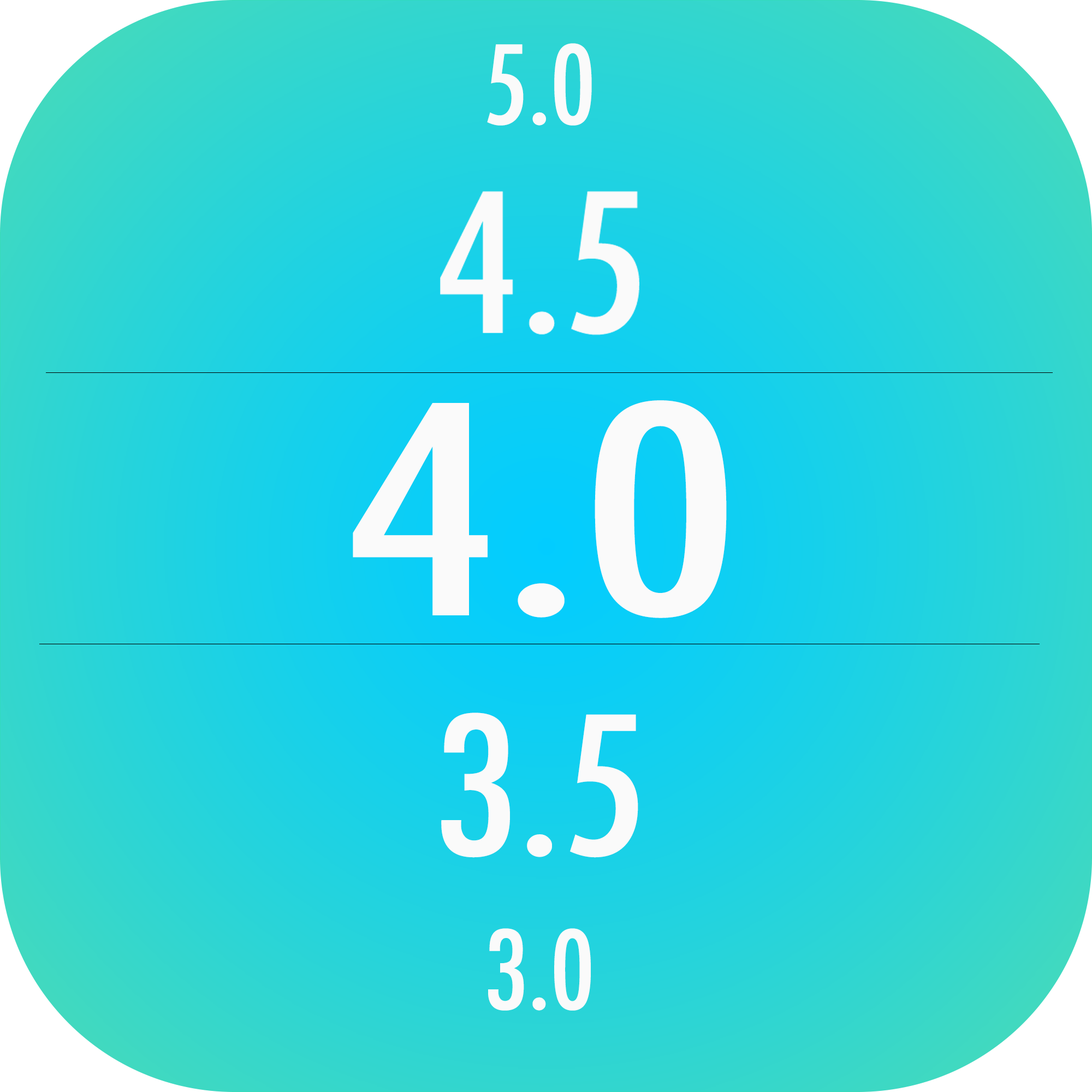
<style>
.page{position:relative;width:1092px;height:1092px}
.page>*{position:absolute;margin:0}
.t1{font:106.2px "Futura-CondensedMedium";color:#fafafa}
.t2{font:281.5px "Futura-CondensedMedium";color:#fafafa;scale:1.37 1}
.t3{font:187.1px "Futura-CondensedMedium";color:#fafafa;scale:1.1 1}
</style>
<div class="page">
<p class="t1" style="left:487px;top:43px;width:105px;height:83px">5.0</p>
<p class="t2" style="left:353px;top:400px;width:374px;height:218px">4.0</p>
<p class="t3" style="left:441px;top:713px;width:197px;height:145px">3.5</p>
<p class="t1" style="left:488px;top:928px;width:103px;height:83px">3.0</p>
</div>
